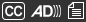
<style>
.page{position:relative;width:86px;height:22px;background:#333333}
.page>*{position:absolute;margin:0}
.t1{font:14.3px "Arial-BoldMT";letter-spacing:-0.05em;color:#ffffff;scale:0.91 1}
.t2{font:17px "Arial-BoldMT";color:#ffffff}
.t3{font:16px "Arial-BoldMT";color:#ffffff}
</style>
<div class="page">
<p class="t1" style="left:5px;top:5px;width:18px;height:12px">CC</p>
<p class="t2" style="left:30px;top:5px;width:12px;height:12px">A</p>
<p class="t3" style="left:43px;top:5px;width:10px;height:12px">D</p>
</div>
